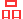
<style>
.page{position:relative;width:23px;height:19px;background:#ffffff}
.page>*{position:absolute;margin:0}
.t1{font:24px "STHeiti";color:#fb3434}
</style>
<div class="page">
<p class="t1" style="left:2px;top:0px;width:19px;height:20px">品</p>
</div>
